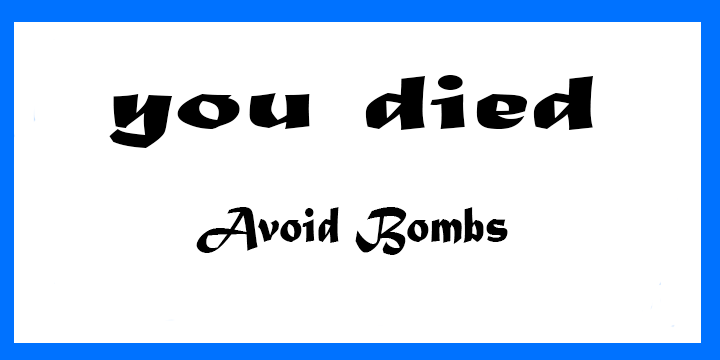
<style>
.page{position:relative;width:720px;height:360px;background:#ffffff}
.page>*{position:absolute;margin:0}
.t1{font:80.6px "MaturaMTScriptCapitals";color:#000000;scale:1.71 1}
.t2{font:53.3px "MaturaMTScriptCapitals";color:#000000;scale:0.88 1}
</style>
<div class="page">
<p class="t1" style="left:109px;top:75px;width:484px;height:73px">you died</p>
<p class="t2" style="left:196px;top:207px;width:312px;height:48px">Avoid Bombs</p>
</div>
